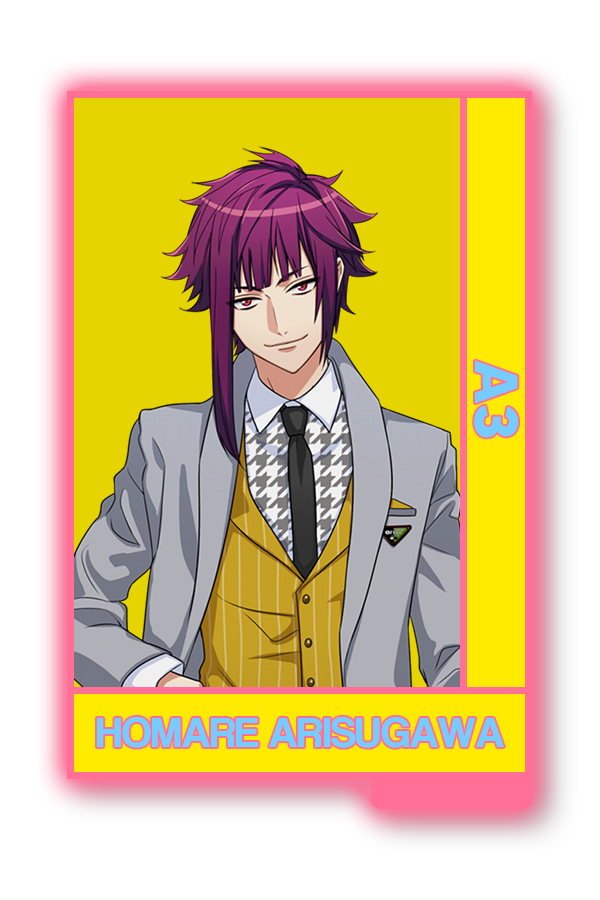
<style>
.page{position:relative;width:600px;height:900px;background:#ffffff}
.page>*{position:absolute;margin:0}
.t1{font:60.5px "MADETOMMY-Bold";color:#74ccff}
.t2{font:43.8px "CoolveticaRg-Regular";color:#74ccff}
</style>
<div class="page">
<p class="t1" style="left:474px;top:360px;width:44px;height:78px;rotate:90deg">A3</p>
<p class="t2" style="left:97px;top:717px;width:407px;height:31px">HOMARE ARISUGAWA</p>
</div>
